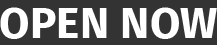
<style>
.page{position:relative;width:217px;height:45px;background:#333333}
.page>*{position:absolute;margin:0}
.t1{font:44px "FiraSans-Bold";color:#ffffff;text-transform:uppercase}
</style>
<div class="page">
<p class="t1" style="left:0px;top:7px;width:217px;height:32px">open now</p>
</div>
